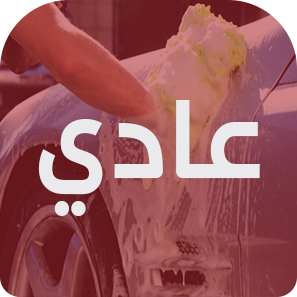
<style>
.page{position:relative;width:297px;height:297px}
.page>*{position:absolute;margin:0}
.t1{font:131.7px "HacenTunisia";letter-spacing:0.015em;color:#ececee;scale:0.96 1}
</style>
<div class="page">
<p class="t1" style="left:38px;top:100px;width:222px;height:116px">عادي</p>
</div>
